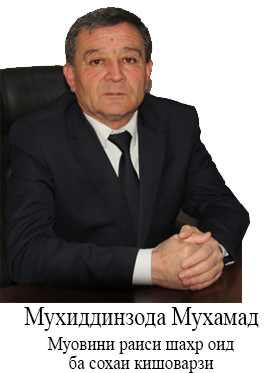
<style>
.page{position:relative;width:280px;height:373px;background:#ffffff}
.page>*{position:absolute;margin:0}
.t1{font:26.9px "TimesNewRomanPSMT";color:#010101;scale:0.84 1}
.t2{font:20.5px "TimesNewRomanPSMT";color:#010101;scale:0.84 1}
</style>
<div class="page">
<p class="t1" style="left:24px;top:307px;width:235px;height:24px">Мухиддинзода Мухамад</p>
<p class="t2" style="left:47px;top:337px;width:187px;height:36px;text-align:center">Муовини раиси шахр оид<br> ба сохаи кишоварзи</p>
</div>
